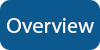
<style>
.page{position:relative;width:100px;height:50px;background:#0c598f}
.page>*{position:absolute;margin:0}
.t1{font:22px "MyriadPro-Regular";color:#ffffff}
</style>
<div class="page">
<p class="t1" style="left:7px;top:18px;width:87px;height:15px">Overview</p>
</div>
